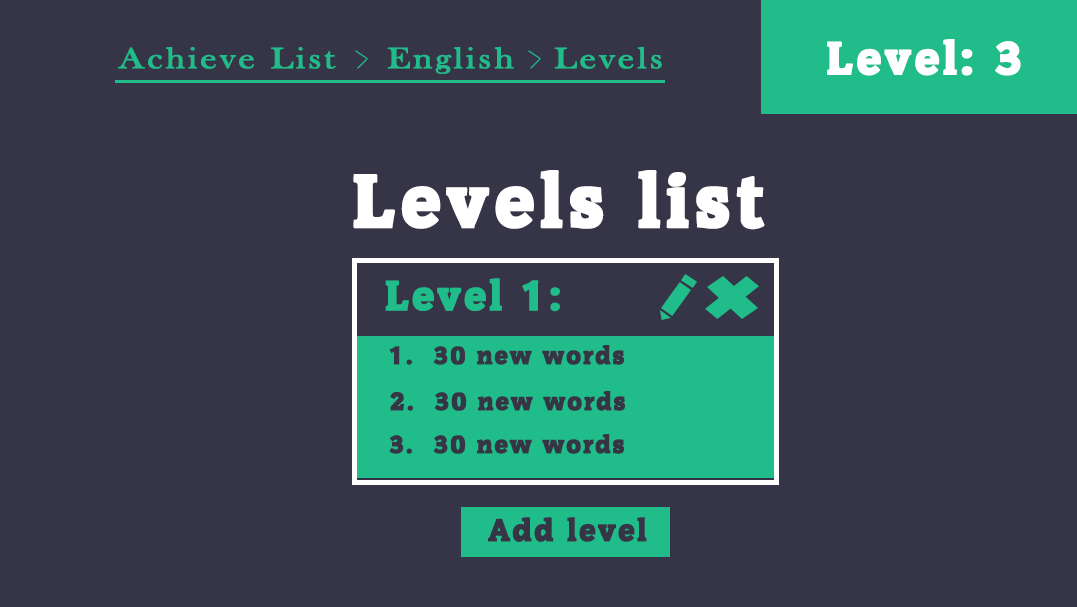
<style>
.page{position:relative;width:1077px;height:607px;background:#363547}
.page>*{position:absolute;margin:0}
.t1{font:44.7px "Commons";letter-spacing:0.07em;color:#ffffff;font-weight:bold}
.t2{font:30px "BaskOldFace";letter-spacing:0.07em;color:#20bc8a;font-weight:bold;scale:1.2 1}
.t3{font:72px "Commons";letter-spacing:0.07em;color:#ffffff;font-weight:bold}
.t4{font:40px "Commons";letter-spacing:0.07em;color:#20bc8a;font-weight:bold}
.t5{font:24px "Commons";letter-spacing:0.07em;color:#363546;font-weight:bold}
.t6{font:30px "Commons";letter-spacing:0.07em;color:#363546;font-weight:bold}
</style>
<div class="page">
<p class="t1" style="left:827px;top:39px;width:194px;height:37px">Level: 3</p>
<p class="t2" style="left:118px;top:46px;width:544px;height:28px">Achieve List    English   Levels</p>
<p class="t3" style="left:353px;top:170px;width:412px;height:60px">Levels list</p>
<p class="t4" style="left:385px;top:278px;width:175px;height:34px">Level 1:</p>
<p class="t5" style="left:389px;top:345px;width:235px;height:20px">1.  30 new words</p>
<p class="t5" style="left:390px;top:391px;width:235px;height:20px">2.  30 new words</p>
<p class="t5" style="left:389px;top:434px;width:235px;height:20px">3.  30 new words</p>
<p class="t6" style="left:488px;top:517px;width:159px;height:25px">Add level</p>
</div>
